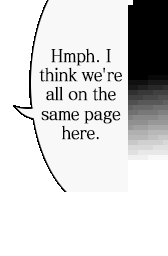
<style>
.page{position:relative;width:168px;height:256px;background:#ffffff}
.page>*{position:absolute;margin:0}
.t1{font:17.6px "MatissePro-M";letter-spacing:-0.05em;color:#000000;font-weight:bold;scale:0.91 1}
.t2{font:17.6px "MatissePro-M";letter-spacing:-0.1em;color:#000000;font-weight:bold;scale:0.91 1}
.t3{font:17.6px "MatissePro-M";letter-spacing:-0.025em;color:#000000;font-weight:bold;scale:0.91 1}
</style>
<div class="page">
<p class="t1" style="left:39px;top:48px;width:83px;height:92px;text-align:center">Hmph. I<br>think w<span class="t2">e</span>'re<br>all on the<br>same <span class="t3">page<br></span>here.</p>
</div>
